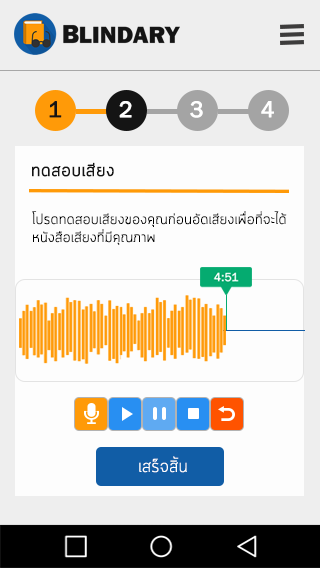
<style>
.page{position:relative;width:320px;height:568px;background:#fdfdfd}
.page>*{position:absolute;margin:0}
.t1{font:23px "FranklinGothic-Book";color:#141414;font-weight:bold}
.t2{font:23px "FranklinGothic-Book";color:#fefefe;font-weight:bold}
.t3{font:23px "FranklinGothic-Book";color:#ffffff;font-weight:bold}
.t4{font:18px "Cloud-Light";color:#141414;font-weight:bold}
.t5{font:15px "Cloud-Light";color:#000000}
.t6{font:18px "Cloud-Light";color:#ffffff}
</style>
<div class="page">
<p class="t1" style="left:49px;top:101px;width:13px;height:17px">1</p>
<p class="t2" style="left:119px;top:101px;width:13px;height:17px">2</p>
<p class="t3" style="left:190px;top:101px;width:13px;height:17px">3</p>
<p class="t3" style="left:261px;top:101px;width:13px;height:17px">4</p>
<p class="t4" style="left:32px;top:162px;width:82px;height:15px">ทดสอบเสียง</p>
<p class="t5" style="left:32px;top:211px;width:255px;height:34px;text-align:right">โปรดทดสอบเสียงของคุณก่อนอัดเสียงเพื่อที่จะได้<br>หนังสือเสียงที่มีคุณภาพ</p>
<p class="t6" style="left:139px;top:456px;width:48px;height:17px">เสร็จสิ้น</p>
</div>
